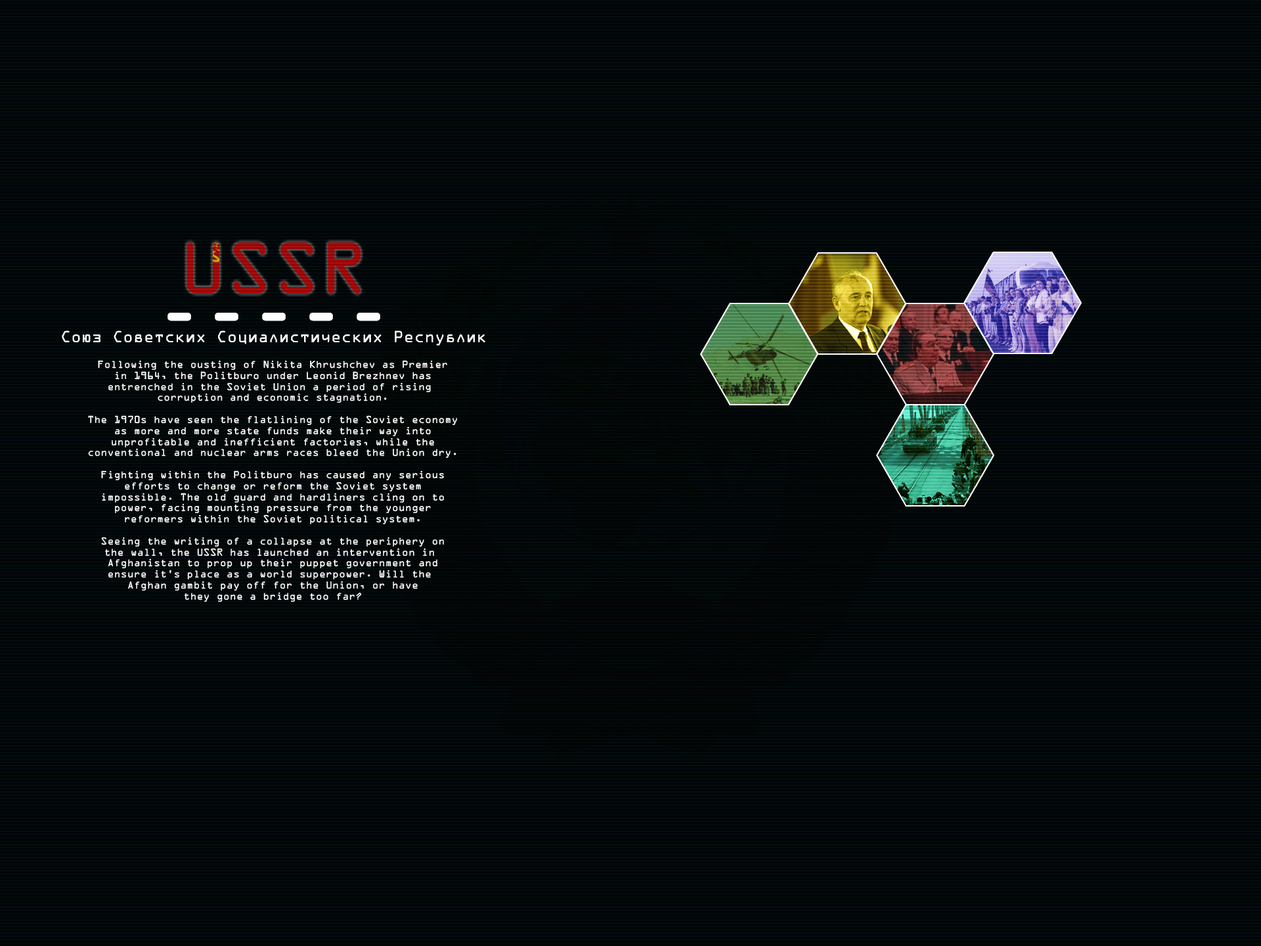
<style>
.page{position:relative;width:1261px;height:946px}
.page>*{position:absolute;margin:0}
.t1{font:65.7px "OCRABeckerRUS-LAT";color:#ffffff}
.t2{font:14.4px "OCRABeckerRUS-LAT";color:#ffffff}
.t3{font:9.2px "OCRABeckerRUS-LAT";color:#ffffff}
</style>
<div class="page">
<p class="t1" style="left:167px;top:313px;width:213px;height:8px">-----</p>
<p class="t2" style="left:62px;top:330px;width:423px;height:15px">Союз Советских Социалистических Республик</p>
<p class="t3" style="left:88px;top:360px;width:369px;height:242px;text-align:center">Following the ousting of Nikita Khrushchev as Premier<br>in 1964, the Politburo under Leonid Brezhnev has<br>entrenched in the Soviet Union a period of rising <br>corruption and economic stagnation.<br><br>The 1970s have seen the flatlining of the Soviet economy<br>as more and more state funds make their way into<br>unprofitable and inefficient factories, while the<br>conventional and nuclear arms races bleed the Union dry.<br><br>Fighting within the Politburo has caused any serious<br>efforts to change or reform the Soviet system<br>impossible. The old guard and hardliners cling on to<br>power, facing mounting pressure from the younger<br>reformers within the Soviet political system.<br><br>Seeing the writing of a collapse at the periphery on<br>the wall, the USSR has launched an intervention in <br>Afghanistan to prop up their puppet government and<br>ensure it’s place as a world superpower. Will the <br>Afghan gambit pay off for the Union, or have<br>they gone a bridge too far?</p>
</div>
